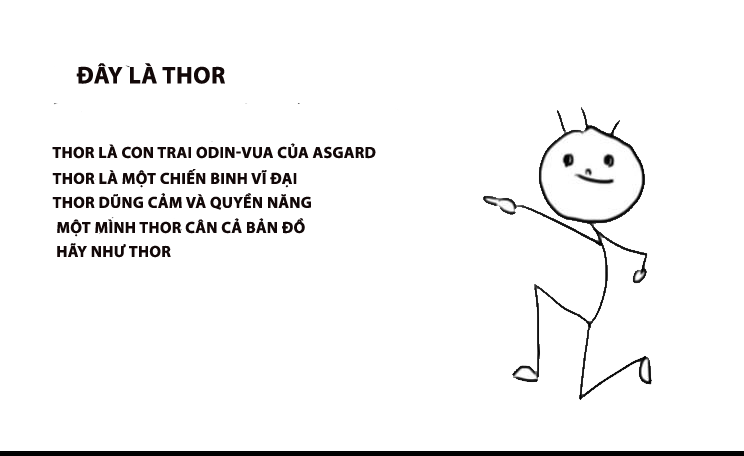
<style>
.page{position:relative;width:744px;height:456px;background:#ffffff}
.page>*{position:absolute;margin:0}
.t1{font:24px "MyriadPro-Bold";letter-spacing:0.025em;color:#120808;text-transform:uppercase}
.t2{font:16px "MyriadPro-Bold";letter-spacing:0.025em;color:#120808;text-transform:uppercase}
.t3{font:16px/24px "MyriadPro-Bold";letter-spacing:0.025em;color:#120808;text-transform:uppercase}
</style>
<div class="page">
<p class="t1" style="left:76px;top:63px;width:149px;height:21px">ĐÂY LÀ THOR</p>
<p class="t2" style="left:52px;top:143px;width:324px;height:16px">THOR LÀ CON TRAI ODIN-VUA CỦA ASGARD</p>
<p class="t3" style="left:52px;top:169px;width:259px;height:41px">THOR là một chiến binh VĨ ĐẠI<br>THOR DŨNG CẢM VÀ QUYỀN NĂNG</p>
<p class="t3" style="left:57px;top:218px;width:248px;height:40px">MỘT MÌNH THOR CÂN CẢ BẢN ĐỒ<br>HÃY NHƯ THOR</p>
</div>
